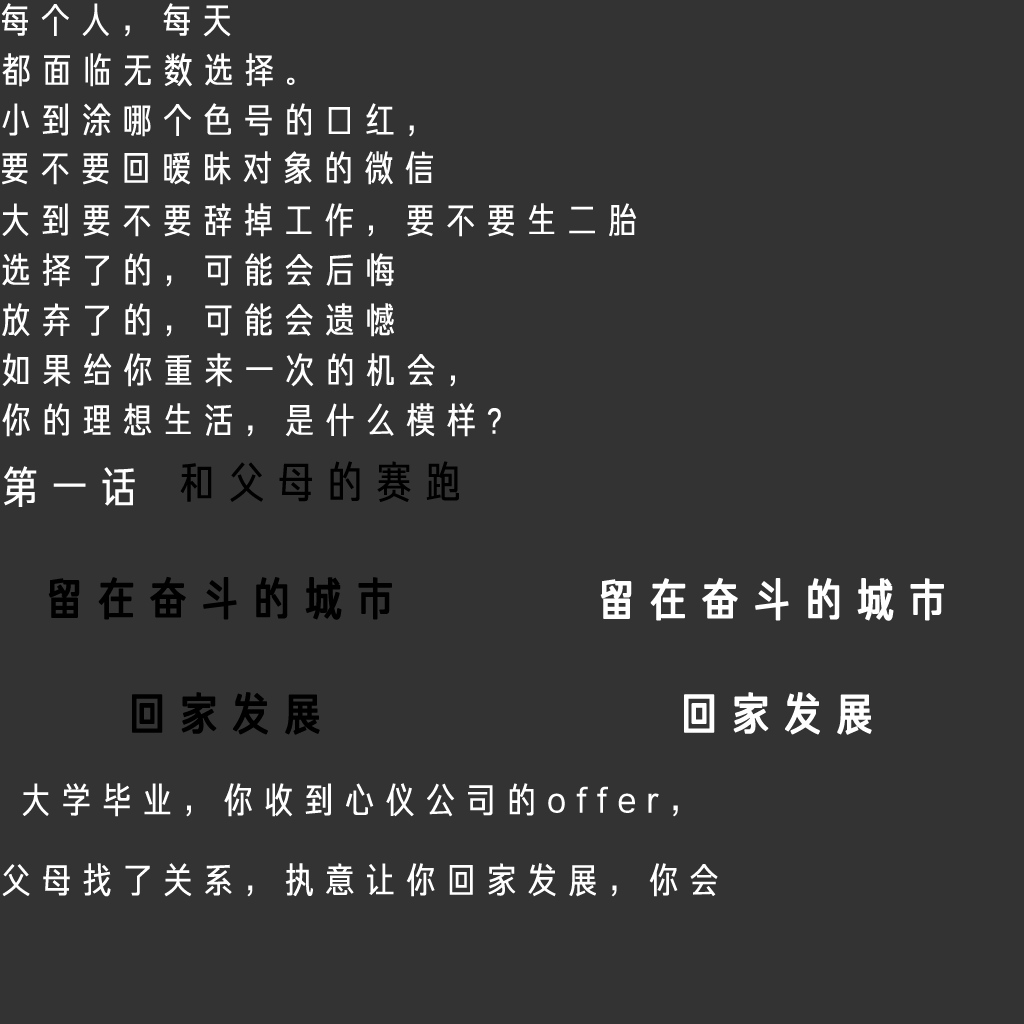
<style>
.page{position:relative;width:1024px;height:1024px;background:#333333}
.page>*{position:absolute;margin:0}
.t1{font:36px "FZJUNH_ZHUNJW--GB1-0";letter-spacing:0.3em;color:#ffffff}
.t2{font:44.4px "FZJUNH_ZHUNJW--GB1-0";letter-spacing:0.3em;color:#000000}
.t3{font:44.4px "FZJUNH_ZHUNJW--GB1-0";letter-spacing:0.3em;color:#ffffff}
.t4{font:45.2px "FZJUNH_ZHUNJW--GB1-0";letter-spacing:0.3em;color:#000000;font-weight:bold}
.t5{font:45.2px "FZJUNH_ZHUNJW--GB1-0";letter-spacing:0.3em;color:#ffffff;font-weight:bold}
.t6{font:36px/80px "FZJUNH_ZHUNJW--GB1-0";letter-spacing:0.3em;color:#ffffff}
</style>
<div class="page">
<p class="t1" style="left:1px;top:3px;width:230px;height:34px">每个人，每天</p>
<p class="t1" style="left:2px;top:53px;width:293px;height:34px">都面临无数选择。</p>
<p class="t1" style="left:2px;top:103px;width:412px;height:34px">小到涂哪个色号的口红，</p>
<p class="t1" style="left:2px;top:151px;width:431px;height:34px">要不要回暧昧对象的微信</p>
<p class="t1" style="left:2px;top:203px;width:635px;height:34px">大到要不要辞掉工作，要不要生二胎</p>
<p class="t1" style="left:2px;top:253px;width:392px;height:34px">选择了的，可能会后悔</p>
<p class="t1" style="left:2px;top:303px;width:392px;height:34px">放弃了的，可能会遗憾</p>
<p class="t1" style="left:2px;top:353px;width:453px;height:34px">如果给你重来一次的机会，</p>
<p class="t1" style="left:2px;top:403px;width:499px;height:34px">你的理想生活，是什么模样？</p>
<p class="t2" style="left:180px;top:461px;width:279px;height:41px">和父母的赛跑</p>
<p class="t3" style="left:4px;top:466px;width:131px;height:41px">第一话</p>
<p class="t4" style="left:48px;top:576px;width:344px;height:44px">留在奋斗的城市</p>
<p class="t5" style="left:600px;top:577px;width:344px;height:44px">留在奋斗的城市</p>
<p class="t4" style="left:132px;top:692px;width:188px;height:43px">回家发展</p>
<p class="t5" style="left:684px;top:692px;width:188px;height:43px">回家发展</p>
<p class="t6" style="left:2px;top:783px;width:716px;height:114px;text-align:center">大学毕业，你收到心仪公司的offer，<br>父母找了关系，执意让你回家发展，你会</p>
</div>
